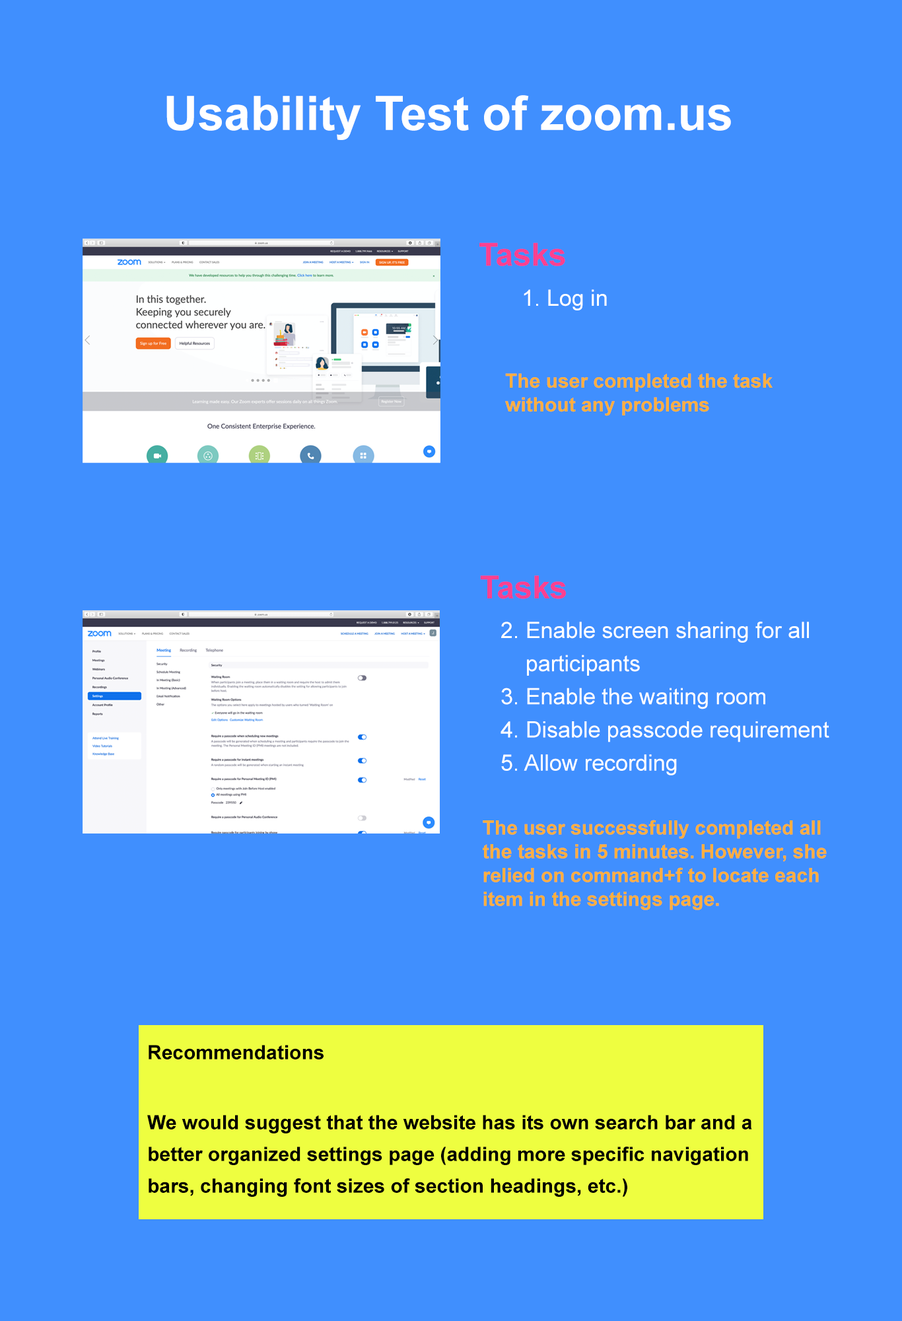
<style>
.page{position:relative;width:902px;height:1321px;background:#408ffe}
.page>*{position:absolute;margin:0}
.t1{font:47.6px "Arial-BoldMT";color:#ffffff}
.t2{font:31.7px "Arial-BoldMT";color:#fe408f}
.t3{font:22.5px "ArialMT";color:#ffffff}
.t4{font:19.8px/23.8px "Arial-BoldMT";color:#feaf40}
.t5{font:22.5px/30px "ArialMT";color:#ffffff}
.t6{font:19.8px/31.7px "Arial-BoldMT";color:#000000}
</style>
<div class="page">
<p class="t1" style="left:166px;top:95px;width:565px;height:45px">Usability Test of zoom.us</p>
<p class="t2" style="left:480px;top:242px;width:86px;height:24px">Tasks</p>
<p class="t3" style="left:524px;top:289px;width:83px;height:22px">1. Log in</p>
<p class="t4" style="left:505px;top:373px;width:268px;height:43px">The user completed the task without any problems</p>
<p class="t2" style="left:480px;top:575px;width:86px;height:24px">Tasks</p>
<p class="t5" style="left:501px;top:622px;width:329px;height:154px">2. Enable screen sharing for all <br>    participants<br>3. Enable the waiting room<br>4. Disable passcode requirement<br>5. Allow recording</p>
<p class="t4" style="left:483px;top:820px;width:344px;height:90px">The user successfully completed all the tasks in 5 minutes. However, she relied on command+f to locate each item in the settings page.</p>
<p class="t6" style="left:147px;top:1045px;width:605px;height:152px">Recommendations<br><br>We would suggest that the website has its own search bar and a better organized settings page (adding more specific navigation bars, changing font sizes of section headings, etc.)</p>
</div>
